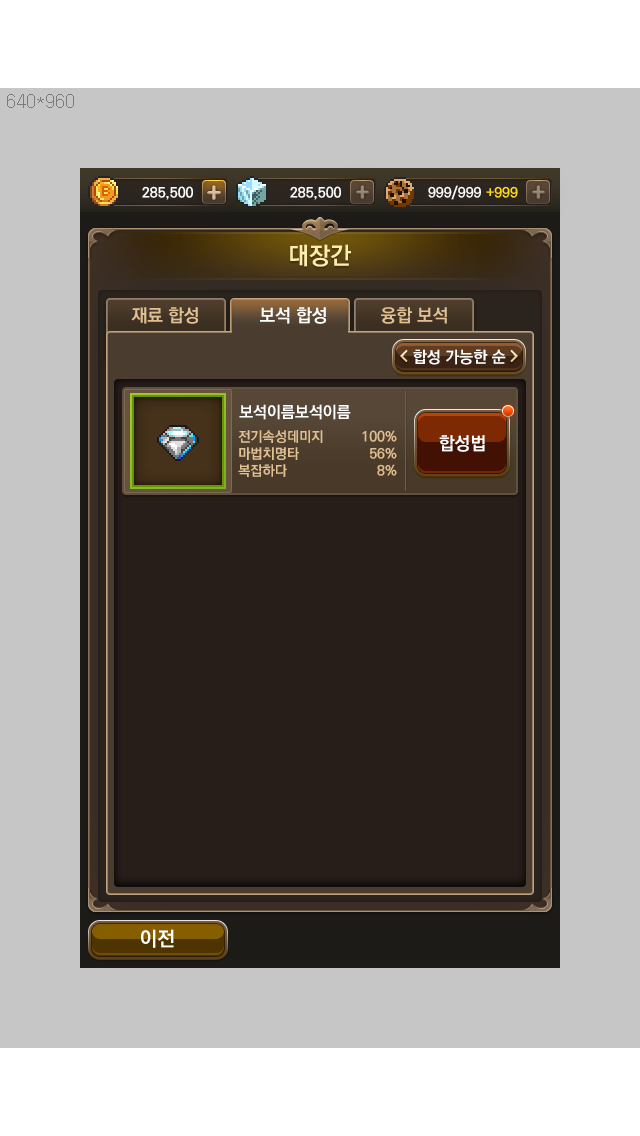
<style>
.page{position:relative;width:640px;height:1136px;background:#c6c6c6}
.page>*{position:absolute;margin:0}
.t1{font:24px "KoPubDotumBold";color:#ffedab}
.t2{font:18px "KoPubDotumBold";color:#e0c093}
.t3{font:18px "KoPubDotumBold";color:#ffffff}
.t4{font:16px "KoPubDotumBold";color:#ffffff}
.t5{font:14px "KoPubDotumBold";color:#e1c093}
.t6{font:14px "KoPubDotumBold";color:#e0bf92}
</style>
<div class="page">
<p class="t1" style="left:290px;top:244px;width:61px;height:23px">대장간</p>
<p class="t2" style="left:131px;top:307px;width:67px;height:17px">재료 합성</p>
<p class="t3" style="left:260px;top:307px;width:66px;height:17px">보석 합성</p>
<p class="t2" style="left:381px;top:307px;width:66px;height:17px">융합 보석</p>
<p class="t4" style="left:413px;top:349px;width:93px;height:16px">합성 가능한 순</p>
<p class="t4" style="left:239px;top:404px;width:112px;height:16px">보석이름보석이름</p>
<p class="t5" style="left:238px;top:430px;width:85px;height:47px">전기속성데미지 <br>마법치명타<br>복잡하다</p>
<p class="t6" style="left:362px;top:430px;width:35px;height:46px;text-align:right">100%<br>56%<br>8%</p>
<p class="t3" style="left:439px;top:435px;width:46px;height:17px">합성법</p>
</div>
